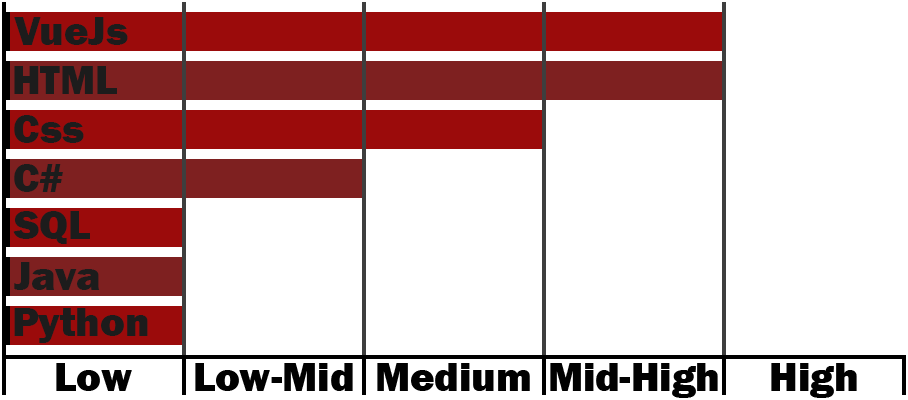
<style>
.page{position:relative;width:908px;height:400px;background:#ffffff}
.page>*{position:absolute;margin:0}
.t1{font:41.7px "FranklinGothic-Heavy";color:#1c1c1c}
.t2{font:41.7px "FranklinGothic-Heavy";color:#010101}
</style>
<div class="page">
<p class="t1" style="left:14px;top:17px;width:114px;height:28px">VueJs</p>
<p class="t1" style="left:14px;top:66px;width:103px;height:28px">HTML</p>
<p class="t1" style="left:14px;top:115px;width:70px;height:28px">Css</p>
<p class="t1" style="left:14px;top:164px;width:49px;height:28px">C#</p>
<p class="t1" style="left:13px;top:211px;width:77px;height:33px">SQL</p>
<p class="t1" style="left:14px;top:262px;width:86px;height:28px">Java</p>
<p class="t1" style="left:14px;top:308px;width:134px;height:35px">Python</p>
<p class="t2" style="left:56px;top:363px;width:76px;height:28px">Low</p>
<p class="t2" style="left:195px;top:363px;width:158px;height:28px">Low-Mid</p>
<p class="t2" style="left:377px;top:363px;width:153px;height:28px">Medium</p>
<p class="t2" style="left:550px;top:363px;width:168px;height:35px">Mid-High</p>
<p class="t2" style="left:771px;top:363px;width:86px;height:35px">High</p>
</div>
